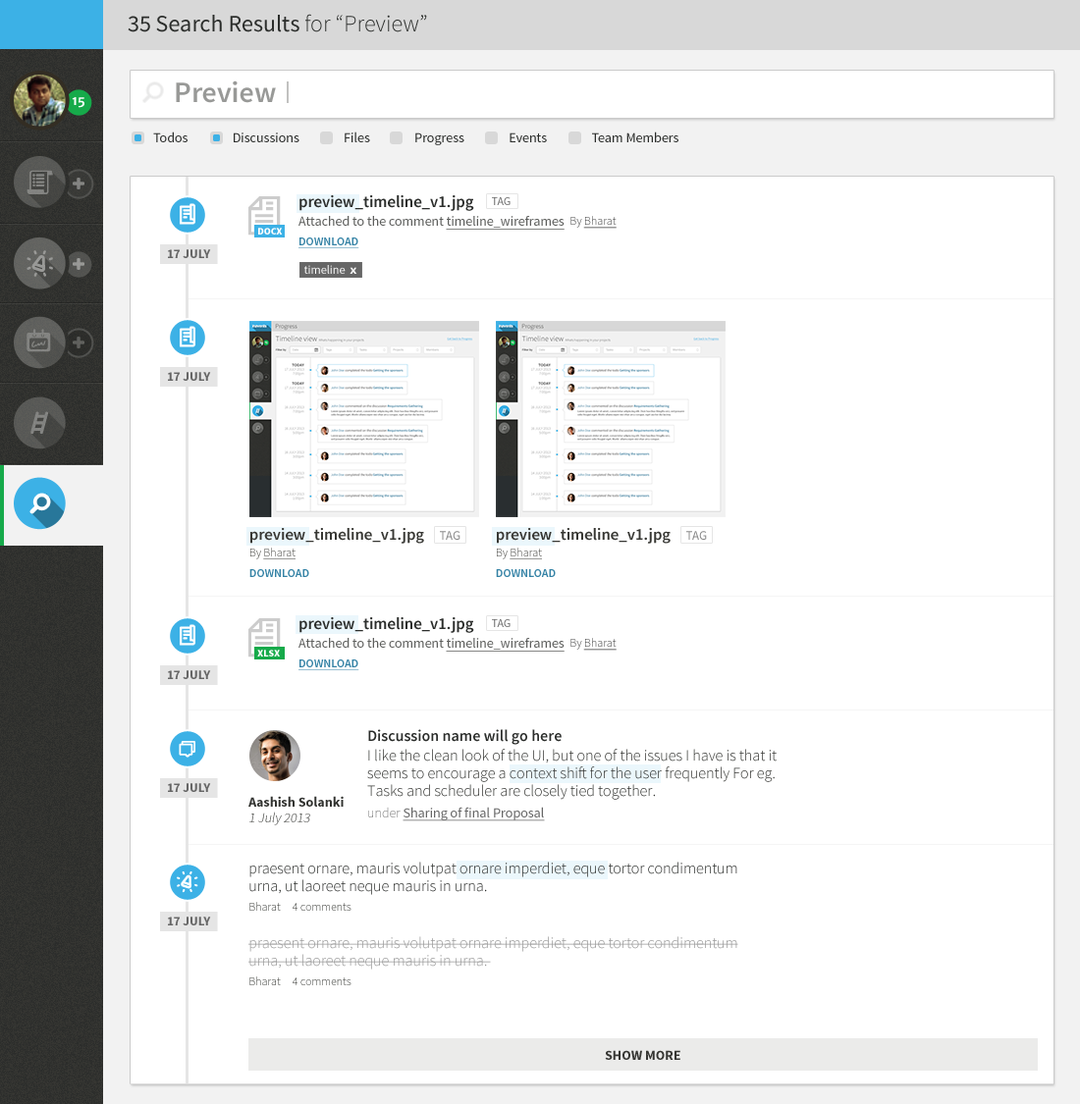
<style>
.page{position:relative;width:1080px;height:1104px;background:#ffffff}
.page>*{position:absolute;margin:0}
.t1{font:23.6px "SourceSansPro-Regular";color:#2b2d2b}
.t2{font:23.6px "SourceSansPro-Light";color:#2b2d2b}
.t3{font:29.4px "SourceSansPro-Semibold";color:#989997}
.t4{font:12.8px "MerriweatherSans-Bold";letter-spacing:-0.04em;color:#ffffff}
.t5{font:13.7px "SourceSansPro-Regular";color:#2b2d2b}
.t6{font:16.4px/18.7px "SourceSansPro-Semibold";color:#2c2e2c}
.t7{font:13.7px/18.7px "SourceSansPro-Regular";color:#5d5e5c}
.t8{font:13.7px/18.7px "SourceSansPro-Regular";color:#5d5e5c;text-decoration:underline}
.t9{font:11.9px/18.7px "SourceSansPro-Light";color:#333333}
.t10{font:11.9px/18.7px "SourceSansPro-Light";color:#333333;text-decoration:underline}
.t11{font:11.9px/20.5px "SourceSansPro-Semibold";color:#3482a5;text-transform:uppercase;text-decoration:underline}
.t12{font:11.8px "SourceSansPro-Regular";color:#666666;text-transform:uppercase}
.t13{font:9.8px "SourceSansPro-Black";color:#ffffff}
.t14{font:12.8px "SourceSansPro-Bold";color:#666666}
.t15{font:12.2px "SourceSansPro-Regular";color:#ffffff}
.t16{font:9.1px "SourceSansPro-Bold";color:#ffffff;scale:1.32 1}
.t17{font:16.4px/18.6px "SourceSansPro-Semibold";color:#373733}
.t18{font:11.8px/18.6px "SourceSansPro-Light";color:#373733}
.t19{font:11.8px/18.6px "SourceSansPro-Light";color:#373733;text-decoration:underline}
.t20{font:11.8px/20.4px "SourceSansPro-Semibold";color:#3482a5;text-transform:uppercase}
.t21{font:12.8px "SourceSansPro-Regular";color:#858585;text-transform:uppercase}
.t22{font:15.7px/17.7px "SourceSansPro-Light";color:#323330}
.t23{font:15.7px/19.6px "SourceSansPro-Semibold";color:#2b2d2b}
.t24{font:15.7px/19.6px "SourceSansPro-Light";color:#323330}
.t25{font:13.7px/21.6px "SourceSansPro-Light";color:#666666}
.t26{font:13.7px/21.6px "SourceSansPro-Regular";color:#666666;text-decoration:underline}
.t27{font:13.7px/15.7px "SourceSansPro-Bold";color:#323330}
.t28{font:13.7px/15.7px "SourceSansPro-Light";color:#323330;font-style:italic}
.t29{font:15.7px/17.7px "SourceSansPro-Light";color:#2c2e2c}
.t30{font:11.8px/19.6px "SourceSansPro-Light";color:#2e2f2b}
.t31{font:15.7px/17.7px "SourceSansPro-Light";color:#999999}
.t32{font:13.7px "SourceSansPro-Bold";color:#363633}
</style>
<div class="page">
<p class="t1" style="left:128px;top:14px;width:299px;height:18px">35 Search Results<span class="t2"> for “Preview”</span></p>
<p class="t3" style="left:176px;top:80px;width:100px;height:23px">Preview</p>
<p class="t4" style="left:72px;top:96px;width:12px;height:12px">15</p>
<p class="t5" style="left:153px;top:132px;width:525px;height:13px">Todos                Discussions                Files                Progress                Events                Team Members</p>
<p class="t6" style="left:298px;top:195px;width:318px;height:53px">preview_timeline_v1.jpg <br><span class="t7">Attached to the comment </span><span class="t8">timeline_wireframes  </span><span class="t9">By </span><span class="t10">Bharat<br></span><span class="t11">Download</span></p>
<p class="t12" style="left:492px;top:197px;width:18px;height:8px">TAG</p>
<p class="t13" style="left:258px;top:228px;width:25px;height:7px">DOCX</p>
<p class="t14" style="left:168px;top:249px;width:43px;height:9px">17 JULY</p>
<p class="t15" style="left:304px;top:265px;width:53px;height:9px">timeline  <span class="t16">X</span></p>
<p class="t14" style="left:168px;top:372px;width:43px;height:9px">17 JULY</p>
<p class="t17" style="left:249px;top:528px;width:175px;height:49px">preview_timeline_v1.jpg  <br><span class="t18">By </span><span class="t19">Bharat<br></span><span class="t20">Download</span></p>
<p class="t21" style="left:440px;top:531px;width:20px;height:9px">TAG</p>
<p class="t17" style="left:496px;top:528px;width:174px;height:49px">preview_timeline_v1.jpg  <br><span class="t18">By </span><span class="t19">Bharat<br></span><span class="t20">Download</span></p>
<p class="t21" style="left:686px;top:531px;width:21px;height:9px">TAG</p>
<p class="t6" style="left:298px;top:617px;width:318px;height:53px">preview_timeline_v1.jpg <br><span class="t7">Attached to the comment </span><span class="t8">timeline_wireframes  </span><span class="t9">By </span><span class="t10">Bharat<br></span><span class="t11">Download</span></p>
<p class="t12" style="left:492px;top:619px;width:18px;height:8px">TAG</p>
<p class="t13" style="left:257px;top:650px;width:23px;height:7px">XLSX</p>
<p class="t14" style="left:168px;top:670px;width:43px;height:9px">17 JULY</p>
<p class="t22" style="left:367px;top:729px;width:409px;height:93px"><span class="t23">Discussion name will go here<br></span><span class="t24">I like the clean look of the UI, but one of the issues I have is that it </span>seems to encourage a context shift for the user frequently For eg. Tasks and scheduler are closely tied together. <br><span class="t25">under </span><span class="t26">Sharing of final Proposal</span></p>
<p class="t14" style="left:168px;top:783px;width:43px;height:9px">17 JULY</p>
<p class="t27" style="left:248px;top:796px;width:96px;height:30px">Aashish Solanki <br><span class="t28">1 July 2013</span></p>
<p class="t29" style="left:248px;top:862px;width:490px;height:124px">praesent ornare, mauris volutpat ornare imperdiet, eque tortor condimentum urna, ut laoreet neque mauris in urna. <br><span class="t30">Bharat     4 comments<br><br></span><span class="t31">praesent ornare, mauris volutpat ornare imperdiet, eque tortor condimentum urna, ut laoreet neque mauris in urna. <br></span><span class="t30">Bharat     4 comments</span></p>
<p class="t14" style="left:168px;top:917px;width:43px;height:9px">17 JULY</p>
<p class="t32" style="left:605px;top:1050px;width:75px;height:10px">SHOW MORE</p>
</div>
